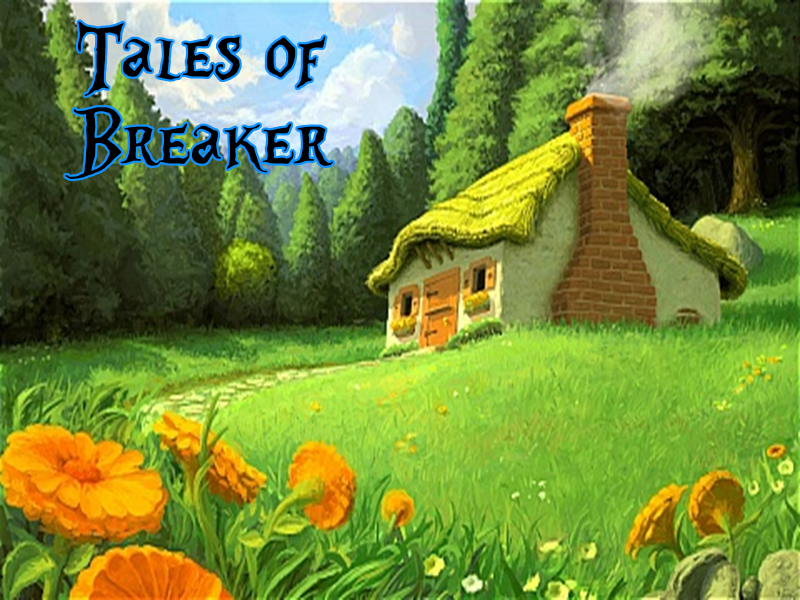
<style>
.page{position:relative;width:800px;height:600px}
.page>*{position:absolute;margin:0}
.t1{font:100px "AliceinWonderland";color:#000000}
</style>
<div class="page">
<p class="t1" style="left:65px;top:21px;width:268px;height:158px">Tales of Breaker</p>
</div>
